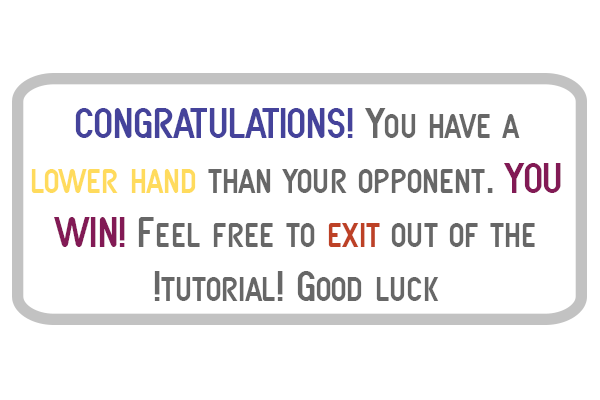
<style>
.page{position:relative;width:600px;height:400px;background:#ffffff}
.page>*{position:absolute;margin:0}
.t1{font:45.3px "SFAtarianSystem";color:#676767}
.t2{font:45.3px "SFAtarianSystem";color:#45439b}
.t3{font:45.3px "SFAtarianSystem";color:#ffdb5d}
.t4{font:45.3px "SFAtarianSystem";color:#821a55}
.t5{font:45.3px "SFAtarianSystem";color:#bd4126}
</style>
<div class="page">
<p class="t1" style="left:31px;top:108px;width:530px;height:193px;text-align:center"><span class="t2">CONGRATULATIONS!</span> You have a <span class="t3">lower hand</span> than your opponent. <span class="t4">YOU WIN!</span> Feel free to <span class="t5">exit</span> out of the<br>tutorial! Good luck!</p>
</div>
